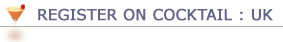
<style>
.page{position:relative;width:283px;height:42px;background:#ffffff}
.page>*{position:absolute;margin:0}
.t1{font:15px "Verdana";color:#636388;font-weight:bold}
</style>
<div class="page">
<p class="t1" style="left:38px;top:8px;width:235px;height:13px">REGISTER ON COCKTAIL : UK</p>
</div>
